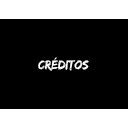
<style>
.page{position:relative;width:128px;height:128px;background:#000000}
.page>*{position:absolute;margin:0}
.t1{font:13px "EdoSZ";color:#ffffff}
</style>
<div class="page">
<p class="t1" style="left:38px;top:57px;width:51px;height:14px">créditos</p>
</div>
